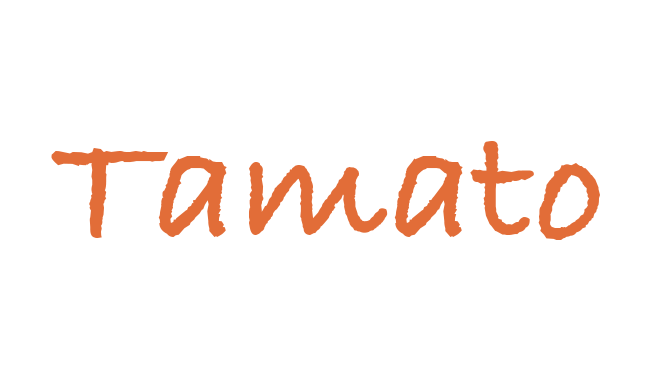
<style>
.page{position:relative;width:662px;height:376px;background:#ffffff}
.page>*{position:absolute;margin:0}
.t1{font:166.7px "BradleyHandITCTT-Bold";color:#e26d38}
</style>
<div class="page">
<p class="t1" style="left:51px;top:141px;width:549px;height:99px">Tamato</p>
</div>
